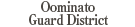
<style>
.page{position:relative;width:135px;height:27px;background:#ffffff}
.page>*{position:absolute;margin:0}
.t1{font:14px/13px "RyuminPro-ExBold";letter-spacing:-0.04em;color:#4c4843;scale:0.9 1}
</style>
<div class="page">
<p class="t1" style="left:29px;top:1px;width:79px;height:25px;text-align:center">Oominato<br>Guard District</p>
</div>
